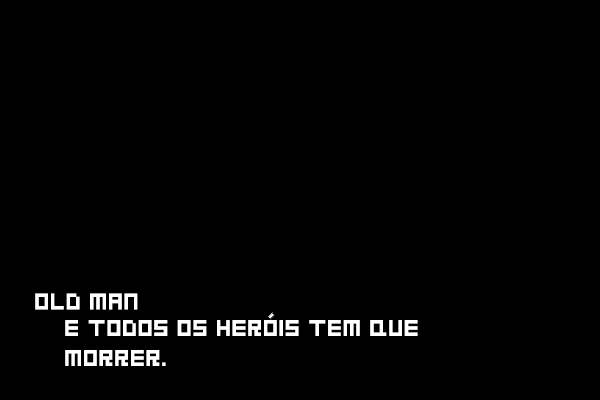
<style>
.page{position:relative;width:600px;height:400px;background:#000000}
.page>*{position:absolute;margin:0}
.t1{font:25px "GoodbyeDespair";color:#ffffff}
</style>
<div class="page">
<p class="t1" style="left:35px;top:293px;width:103px;height:17px">Old Man</p>
<p class="t1" style="left:65px;top:320px;width:353px;height:46px">E TODOS OS HEROIS TEM QUE MORRER.</p>
</div>
